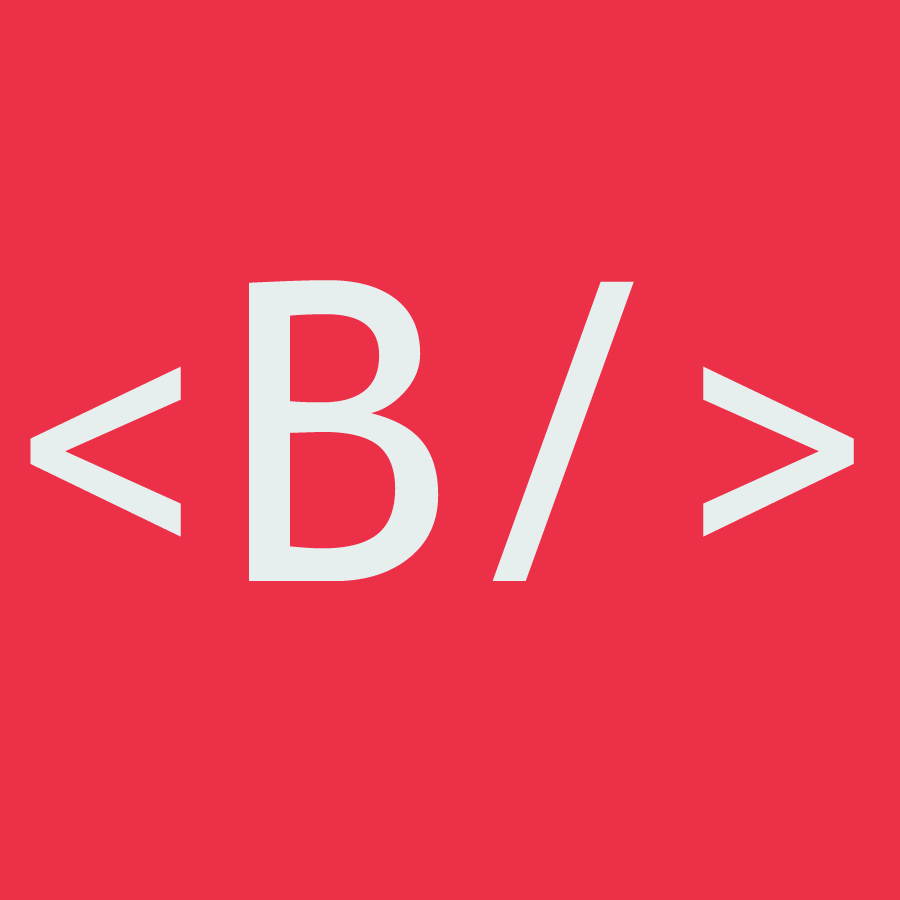
<style>
.page{position:relative;width:900px;height:900px;background:#ec3048}
.page>*{position:absolute;margin:0}
.t1{font:416.7px "TrebuchetMS";color:#e7eeee}
</style>
<div class="page">
<p class="t1" style="left:30px;top:280px;width:824px;height:301px">&lt;B/&gt;</p>
</div>
